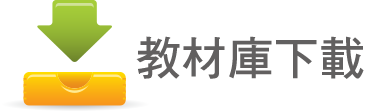
<style>
.page{position:relative;width:384px;height:111px;background:#ffffff}
.page>*{position:absolute;margin:0}
.t1{font:45.9px "DFHei-Bd-HK-BF";color:#626060}
</style>
<div class="page">
<p class="t1" style="left:136px;top:36px;width:228px;height:43px">教材庫下載</p>
</div>
